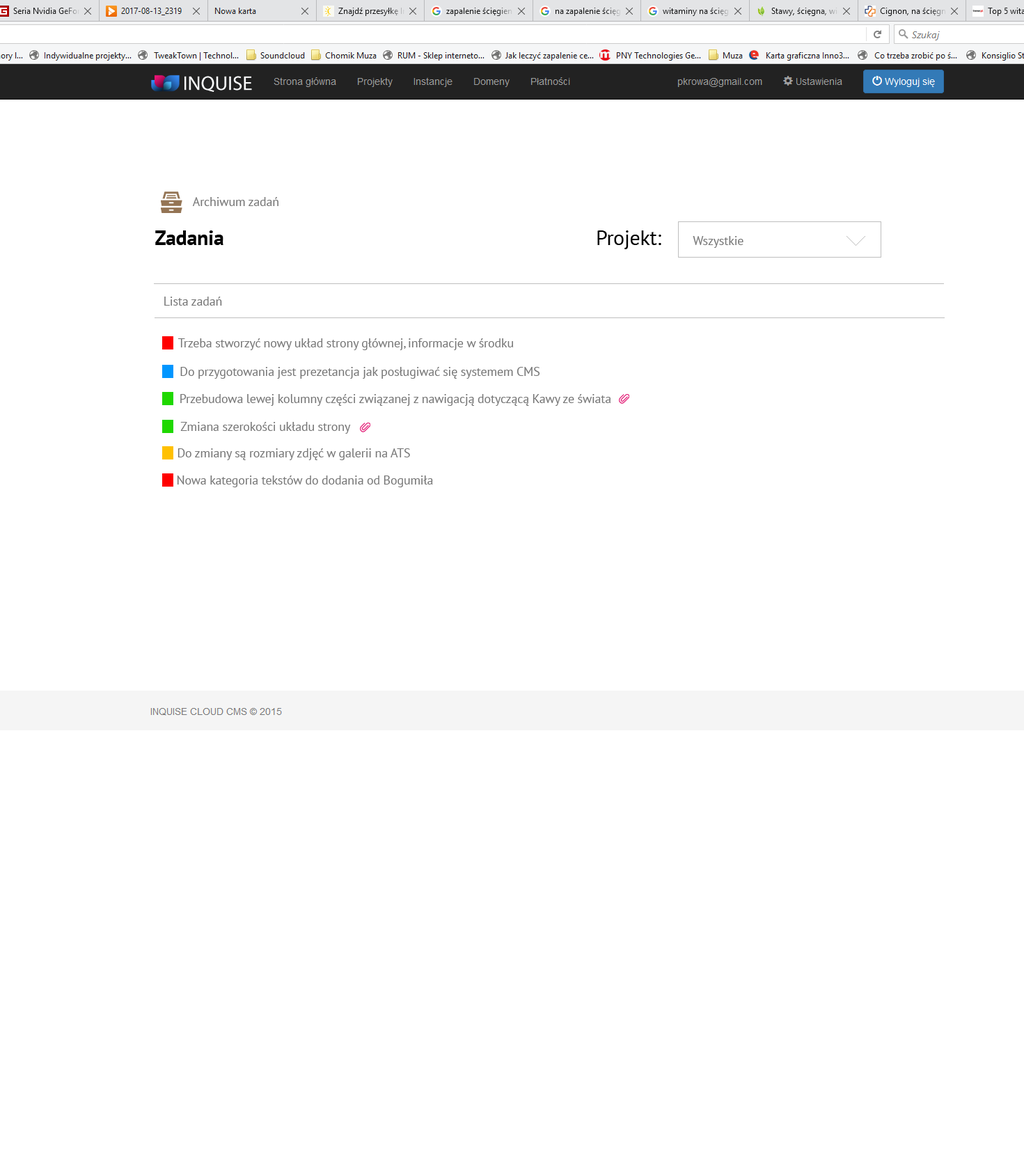
<style>
.page{position:relative;width:1024px;height:1164px;background:#ffffff}
.page>*{position:absolute;margin:0}
.t1{font:12.5px "PTSans-Regular";letter-spacing:-0.01em;color:#777777}
.t2{font:20.9px "PTSans-Bold";letter-spacing:-0.01em;color:#000000}
.t3{font:20.9px "PTSans-Regular";letter-spacing:-0.01em;color:#000000}
</style>
<div class="page">
<p class="t1" style="left:192px;top:197px;width:87px;height:9px">Archiwum zadań</p>
<p class="t2" style="left:155px;top:230px;width:69px;height:15px">Zadania</p>
<p class="t3" style="left:597px;top:230px;width:64px;height:19px">Projekt:</p>
<p class="t1" style="left:693px;top:236px;width:51px;height:12px">Wszystkie</p>
<p class="t1" style="left:164px;top:297px;width:58px;height:9px">Lista zadań</p>
<p class="t1" style="left:178px;top:338px;width:335px;height:12px">Trzeba stworzyć nowy układ strony głównej, informacje w środku</p>
<p class="t1" style="left:180px;top:367px;width:360px;height:12px">Do przygotowania jest prezetancja jak posługiwać się systemem CMS</p>
<p class="t1" style="left:180px;top:394px;width:431px;height:12px">Przebudowa lewej kolumny części związanej z nawigacją dotyczącą Kawy ze świata</p>
<p class="t1" style="left:180px;top:422px;width:171px;height:12px">Zmiana szerokości układu strony</p>
<p class="t1" style="left:178px;top:448px;width:232px;height:12px">Do zmiany są rozmiary zdjęć w galerii na ATS</p>
<p class="t1" style="left:177px;top:476px;width:256px;height:11px">Nowa kategoria tekstów do dodania od Bogumiła</p>
</div>
